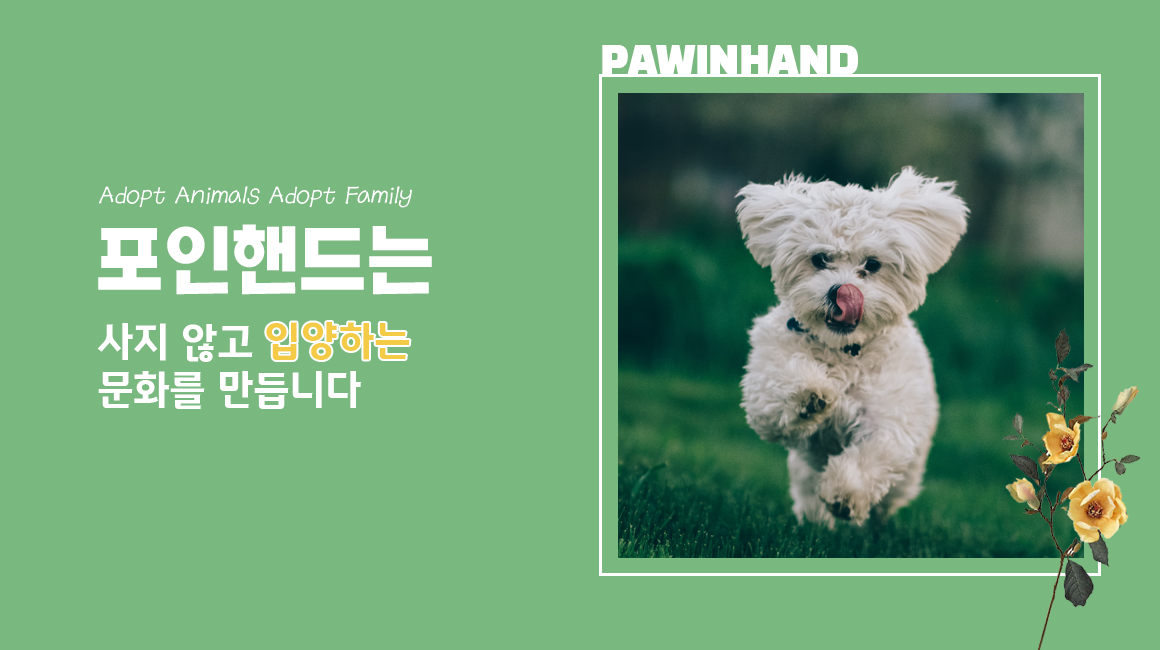
<style>
.page{position:relative;width:1160px;height:650px;background:#79b87e}
.page>*{position:absolute;margin:0}
.t1{font:40px "BlackHanSans-Regular";letter-spacing:-0.02em;color:#ffffff}
.t2{font:25px "ACCchildrenskyOTF";color:#ffffff;font-style:italic}
.t3{font:70px "KOTRA_BOLD-Bold";letter-spacing:-0.02em;color:#ffffff}
.t4{font:40px "Gwangyang-Touching";letter-spacing:-0.02em;color:#ffffff}
.t5{font:40px "Gwangyang-Touching";color:#f4cb46}
</style>
<div class="page">
<p class="t1" style="left:602px;top:45px;width:256px;height:30px">PAWINHAND</p>
<p class="t2" style="left:99px;top:186px;width:313px;height:22px">Adopt Animals Adopt Family</p>
<p class="t3" style="left:98px;top:224px;width:334px;height:71px">포인핸드는</p>
<p class="t4" style="left:97px;top:323px;width:265px;height:86px">사지 않고<br>문화를 만듭니다</p>
<p class="t5" style="left:266px;top:322px;width:144px;height:38px">입양하는</p>
</div>
